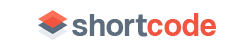
<style>
.page{position:relative;width:250px;height:50px;background:#ffffff}
.page>*{position:absolute;margin:0}
.t1{font:33.8px "CoolveticaRg-Regular";letter-spacing:0.02em;color:#5d6d7e}
.t2{font:33.8px "SourceSansPro-Semibold";letter-spacing:-0.02em;color:#5d6d7e;font-weight:bold}
.t3{font:33.8px "CoolveticaRg-Regular";letter-spacing:0.02em;color:#f15540}
</style>
<div class="page">
<p class="t1" style="left:72px;top:13px;width:144px;height:24px">shor<span class="t2">t</span><span class="t3">code</span></p>
</div>
